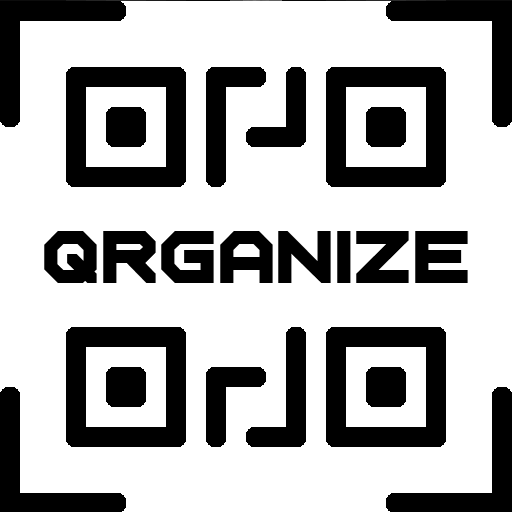
<style>
.page{position:relative;width:512px;height:512px;background:#ffffff}
.page>*{position:absolute;margin:0}
.t1{font:66.7px "NameSmile";color:#000000}
</style>
<div class="page">
<p class="t1" style="left:44px;top:230px;width:424px;height:52px">Qrganize</p>
</div>
